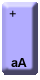
<style>
.page{position:relative;width:40px;height:80px;background:#b2acff}
.page>*{position:absolute;margin:0}
.t1{font:12.5px "ArialMT";letter-spacing:-0.01em;color:#000000}
.t2{font:12.5px "Arial-BoldMT";letter-spacing:-0.01em;color:#000000}
</style>
<div class="page">
<p class="t1" style="left:9px;top:10px;width:7px;height:7px">+</p>
<p class="t2" style="left:11px;top:58px;width:16px;height:9px">aA</p>
</div>
